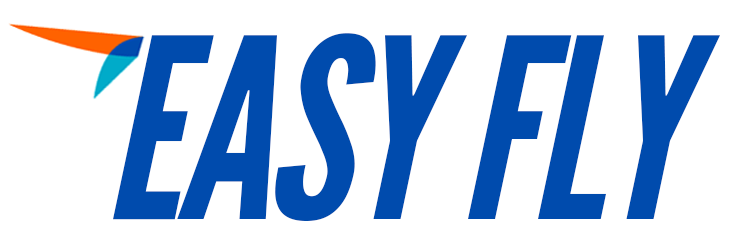
<style>
.page{position:relative;width:737px;height:251px;background:#ffffff}
.page>*{position:absolute;margin:0}
.t1{font:250px "LeagueGothic-Italic";letter-spacing:-0.02em;color:#004bad}
</style>
<div class="page">
<p class="t1" style="left:113px;top:33px;width:607px;height:188px">EASY FLY</p>
</div>
